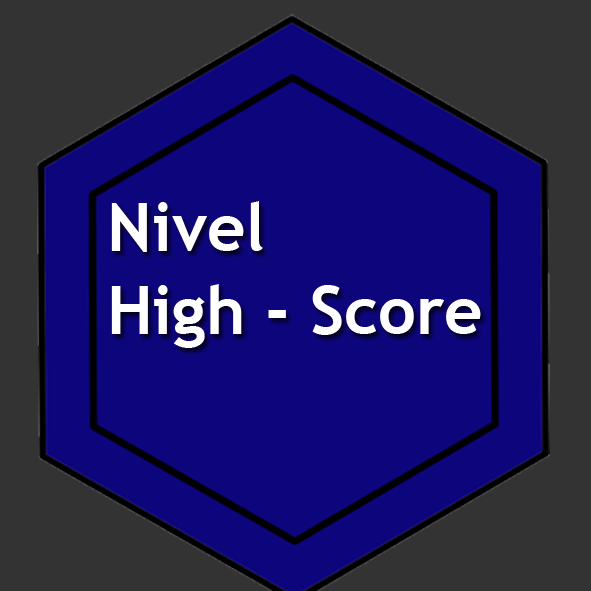
<style>
.page{position:relative;width:591px;height:591px;background:#0d057c}
.page>*{position:absolute;margin:0}
.t1{font:66.7px "TrebuchetMS-Bold";color:#ffffff}
</style>
<div class="page">
<p class="t1" style="left:111px;top:201px;width:152px;height:51px">Nivel</p>
<p class="t1" style="left:111px;top:284px;width:370px;height:64px">High - Score</p>
</div>
